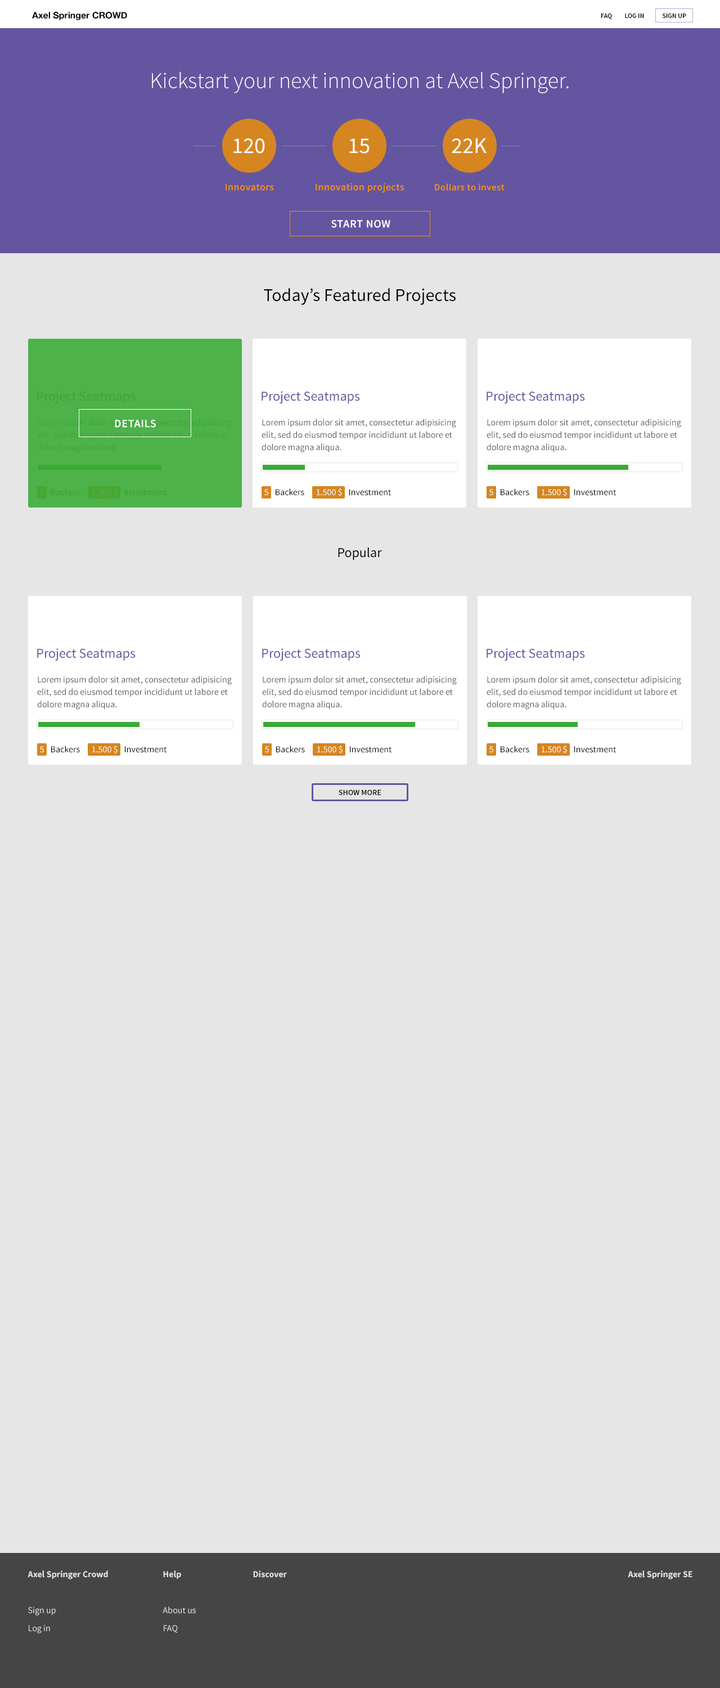
<style>
.page{position:relative;width:720px;height:1688px;background:#e6e6e6}
.page>*{position:absolute;margin:0}
.t1{font:9px "HelveticaNeue-Bold";color:#000000}
.t2{font:6.8px "SourceSansPro-Semibold";color:#000000;text-transform:uppercase}
.t3{font:22.5px "SourceSansPro-Light";color:#ffffff}
.t4{font:22.5px "SourceSansPro-Regular";color:#ffffff}
.t5{font:10.1px "SourceSansPro-Semibold";letter-spacing:0.025em;color:#f39200}
.t6{font:9.6px "SourceSansPro-Semibold";letter-spacing:0.025em;color:#f39200}
.t7{font:11.2px "SourceSansPro-Semibold";letter-spacing:0.032em;color:#ffffff;text-transform:uppercase}
.t8{font:18px "SourceSansPro-Regular";color:#000000}
.t9{font:13.5px "SourceSansPro-Regular";color:#3ea23f}
.t10{font:13.5px "SourceSansPro-Regular";color:#6455a0}
.t11{font:9px/12.4px "SourceSansPro-Regular";color:#585858}
.t12{font:9px "SourceSansPro-Regular";color:#4db249}
.t13{font:9px "SourceSansPro-Regular";color:#349930}
.t14{font:9px "SourceSansPro-Regular";color:#ffffff}
.t15{font:9px "SourceSansPro-Regular";color:#000000}
.t16{font:13.5px "SourceSansPro-Regular";color:#000000}
.t17{font:7.9px "SourceSansPro-Semibold";color:#000000;text-transform:uppercase}
.t18{font:9px/18px "SourceSansPro-Bold";color:#e2e2e2}
.t19{font:9px/18px "SourceSansPro-Regular";color:#e2e2e2}
.t20{font:9px "SourceSansPro-Bold";color:#e2e2e2}
</style>
<div class="page">
<p class="t1" style="left:32px;top:12px;width:95px;height:8px">Axel Springer CROWD</p>
<p class="t2" style="left:601px;top:14px;width:85px;height:5px">FAQ         Log IN             Sign Up</p>
<p class="t3" style="left:152px;top:71px;width:417px;height:22px">Kickstart your next innovation at Axel Springer.</p>
<p class="t4" style="left:452px;top:138px;width:35px;height:15px">22K</p>
<p class="t4" style="left:233px;top:138px;width:32px;height:16px">120</p>
<p class="t4" style="left:349px;top:138px;width:21px;height:16px">15</p>
<p class="t5" style="left:226px;top:183px;width:48px;height:8px">Innovators</p>
<p class="t5" style="left:316px;top:183px;width:88px;height:10px">Innovation projects</p>
<p class="t6" style="left:435px;top:183px;width:70px;height:8px">Dollars to invest</p>
<p class="t7" style="left:331px;top:220px;width:59px;height:8px">Start Now</p>
<p class="t8" style="left:264px;top:288px;width:192px;height:17px">Today’s Featured Projects</p>
<p class="t9" style="left:37px;top:391px;width:99px;height:13px">Project Seatmaps</p>
<p class="t10" style="left:262px;top:391px;width:98px;height:13px">Project Seatmaps</p>
<p class="t10" style="left:487px;top:391px;width:98px;height:13px">Project Seatmaps</p>
<p class="t7" style="left:115px;top:420px;width:41px;height:8px">Details</p>
<p class="t11" style="left:262px;top:418px;width:194px;height:34px">Lorem ipsum dolor sit amet, consectetur adipisicing elit, sed do eiusmod tempor incididunt ut labore et dolore magna aliqua.</p>
<p class="t11" style="left:487px;top:418px;width:194px;height:34px">Lorem ipsum dolor sit amet, consectetur adipisicing elit, sed do eiusmod tempor incididunt ut labore et dolore magna aliqua.</p>
<p class="t12" style="left:40px;top:489px;width:4px;height:7px">5</p>
<p class="t13" style="left:51px;top:488px;width:29px;height:8px">Backers</p>
<p class="t12" style="left:92px;top:488px;width:26px;height:8px">1.500 $</p>
<p class="t13" style="left:125px;top:489px;width:41px;height:7px">Investment</p>
<p class="t14" style="left:264px;top:489px;width:4px;height:7px">5</p>
<p class="t15" style="left:276px;top:488px;width:28px;height:8px">Backers</p>
<p class="t14" style="left:317px;top:488px;width:25px;height:8px">1.500 $</p>
<p class="t15" style="left:349px;top:489px;width:42px;height:7px">Investment</p>
<p class="t14" style="left:489px;top:489px;width:4px;height:7px">5</p>
<p class="t15" style="left:501px;top:488px;width:28px;height:8px">Backers</p>
<p class="t14" style="left:542px;top:488px;width:25px;height:8px">1.500 $</p>
<p class="t15" style="left:574px;top:489px;width:42px;height:7px">Investment</p>
<p class="t16" style="left:338px;top:547px;width:44px;height:13px">Popular</p>
<p class="t10" style="left:37px;top:648px;width:99px;height:13px">Project Seatmaps</p>
<p class="t10" style="left:262px;top:648px;width:99px;height:13px">Project Seatmaps</p>
<p class="t10" style="left:487px;top:648px;width:98px;height:13px">Project Seatmaps</p>
<p class="t11" style="left:37px;top:676px;width:195px;height:33px">Lorem ipsum dolor sit amet, consectetur adipisicing elit, sed do eiusmod tempor incididunt ut labore et dolore magna aliqua.</p>
<p class="t11" style="left:262px;top:676px;width:195px;height:33px">Lorem ipsum dolor sit amet, consectetur adipisicing elit, sed do eiusmod tempor incididunt ut labore et dolore magna aliqua.</p>
<p class="t11" style="left:487px;top:676px;width:194px;height:33px">Lorem ipsum dolor sit amet, consectetur adipisicing elit, sed do eiusmod tempor incididunt ut labore et dolore magna aliqua.</p>
<p class="t14" style="left:40px;top:746px;width:4px;height:7px">5</p>
<p class="t15" style="left:51px;top:745px;width:29px;height:8px">Backers</p>
<p class="t14" style="left:92px;top:745px;width:26px;height:8px">1.500 $</p>
<p class="t15" style="left:125px;top:746px;width:41px;height:7px">Investment</p>
<p class="t14" style="left:265px;top:746px;width:4px;height:7px">5</p>
<p class="t15" style="left:276px;top:745px;width:29px;height:8px">Backers</p>
<p class="t14" style="left:317px;top:745px;width:26px;height:8px">1.500 $</p>
<p class="t15" style="left:350px;top:746px;width:42px;height:7px">Investment</p>
<p class="t14" style="left:489px;top:746px;width:4px;height:7px">5</p>
<p class="t15" style="left:501px;top:745px;width:28px;height:8px">Backers</p>
<p class="t14" style="left:542px;top:745px;width:25px;height:8px">1.500 $</p>
<p class="t15" style="left:574px;top:746px;width:42px;height:7px">Investment</p>
<p class="t17" style="left:339px;top:789px;width:42px;height:6px">show more</p>
<p class="t18" style="left:28px;top:1570px;width:80px;height:63px">Axel Springer Crowd<br><span class="t19"><br>Sign up<br>Log in</span></p>
<p class="t19" style="left:163px;top:1570px;width:33px;height:62px"><span class="t18">Help<br></span><br>About us<br>FAQ</p>
<p class="t20" style="left:253px;top:1570px;width:34px;height:7px">Discover</p>
<p class="t20" style="left:628px;top:1570px;width:64px;height:9px">Axel Springer SE</p>
</div>
